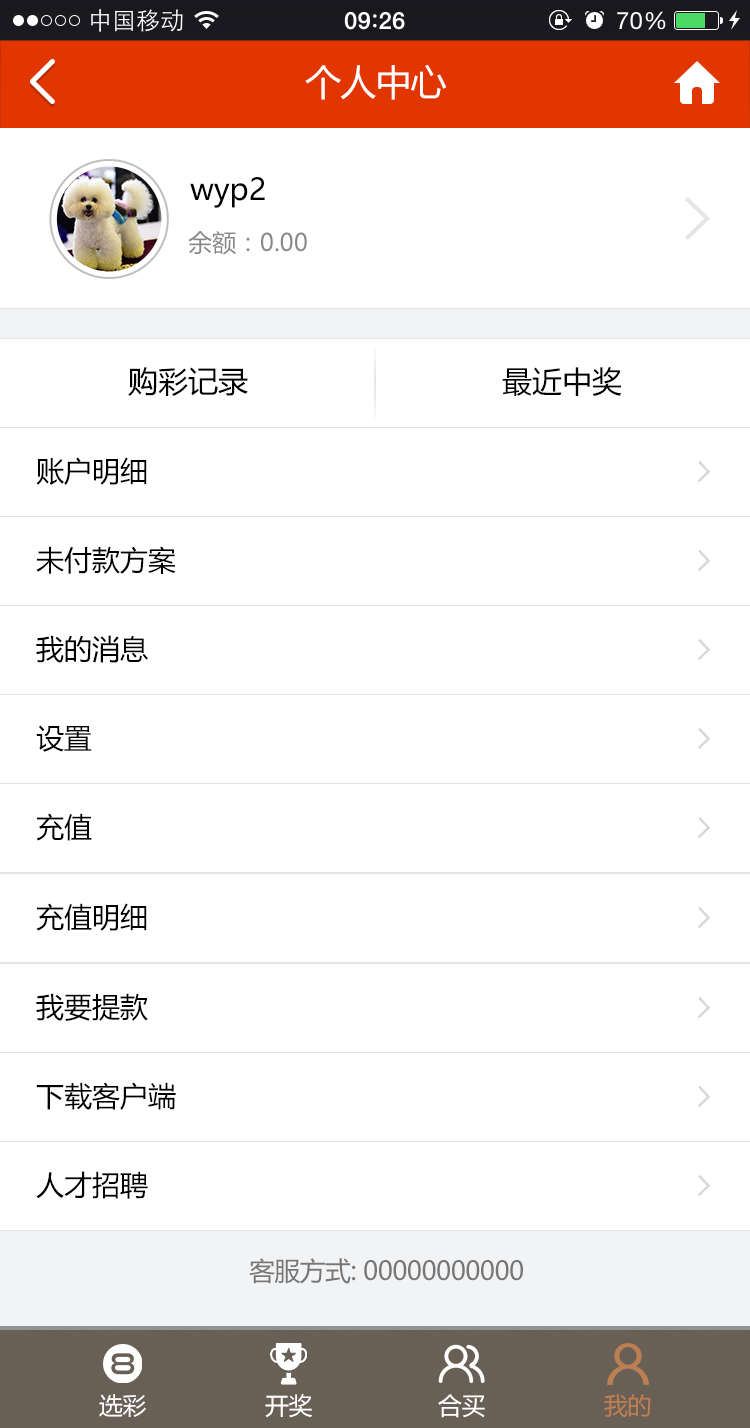
<style>
.page{position:relative;width:750px;height:1428px;background:#ffffff}
.page>*{position:absolute;margin:0}
.t1{font:36px "MicrosoftYaHei";letter-spacing:-0.025em;color:#ffffff}
.t2{font:30px "MicrosoftYaHei";color:#000000}
.t3{font:24px "MicrosoftYaHei";color:#888888}
.t4{font:28px "MicrosoftYaHei";color:#000000}
.t5{font:26px "MicrosoftYaHei";letter-spacing:-0.025em;color:#767676}
.t6{font:24px "MicrosoftYaHei";letter-spacing:-0.025em;color:#ffffff}
.t7{font:24px "MicrosoftYaHei";letter-spacing:-0.025em;color:#bc7e53}
</style>
<div class="page">
<p class="t1" style="left:305px;top:64px;width:142px;height:36px">个人中心</p>
<p class="t2" style="left:190px;top:177px;width:75px;height:31px">wyp2</p>
<p class="t3" style="left:188px;top:231px;width:119px;height:24px">余额：0.00</p>
<p class="t2" style="left:128px;top:367px;width:120px;height:29px">购彩记录</p>
<p class="t2" style="left:502px;top:367px;width:120px;height:29px">最近中奖</p>
<p class="t4" style="left:36px;top:457px;width:111px;height:28px">账户明细</p>
<p class="t4" style="left:36px;top:546px;width:140px;height:28px">未付款方案</p>
<p class="t4" style="left:36px;top:635px;width:112px;height:28px">我的消息</p>
<p class="t4" style="left:36px;top:725px;width:56px;height:27px">设置</p>
<p class="t4" style="left:36px;top:813px;width:56px;height:28px">充值</p>
<p class="t4" style="left:36px;top:903px;width:111px;height:28px">充值明细</p>
<p class="t4" style="left:36px;top:993px;width:112px;height:28px">我要提款</p>
<p class="t4" style="left:36px;top:1082px;width:140px;height:28px">下载客户端</p>
<p class="t4" style="left:36px;top:1171px;width:112px;height:28px">人才招聘</p>
<p class="t5" style="left:249px;top:1258px;width:274px;height:26px">客服方式: 00000000000</p>
<p class="t6" style="left:99px;top:1394px;width:47px;height:23px">选彩</p>
<p class="t6" style="left:265px;top:1394px;width:48px;height:24px">开奖</p>
<p class="t6" style="left:438px;top:1394px;width:47px;height:24px">合买</p>
<p class="t7" style="left:604px;top:1394px;width:47px;height:23px">我的</p>
</div>
